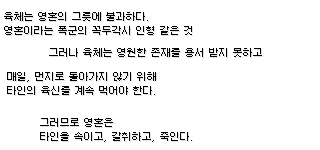
<style>
.page{position:relative;width:320px;height:150px;background:#ffffff}
.page>*{position:absolute;margin:0}
.t1{font:10px/14px "Galmuri9-Regular";color:#000000}
.t2{font:10px "Galmuri9-Regular";color:#000000}
</style>
<div class="page">
<p class="t1" style="left:4px;top:12px;width:188px;height:23px">육체는 영혼의 그릇에 불과하다.<br>영혼이라는 폭군의 꼭두각시 인형 같은 것</p>
<p class="t2" style="left:49px;top:48px;width:213px;height:9px">그러나 육체는 영원한 존재를 용서 받지 못하고</p>
<p class="t1" style="left:7px;top:72px;width:149px;height:23px">매일, 먼지로 돌아가지 않기 위해<br>타인의 육신를 계속 먹어야 한다.</p>
<p class="t1" style="left:40px;top:118px;width:152px;height:24px">그러므로 영혼은<br>타인을 속이고, 갈취하고, 죽인다.</p>
</div>
